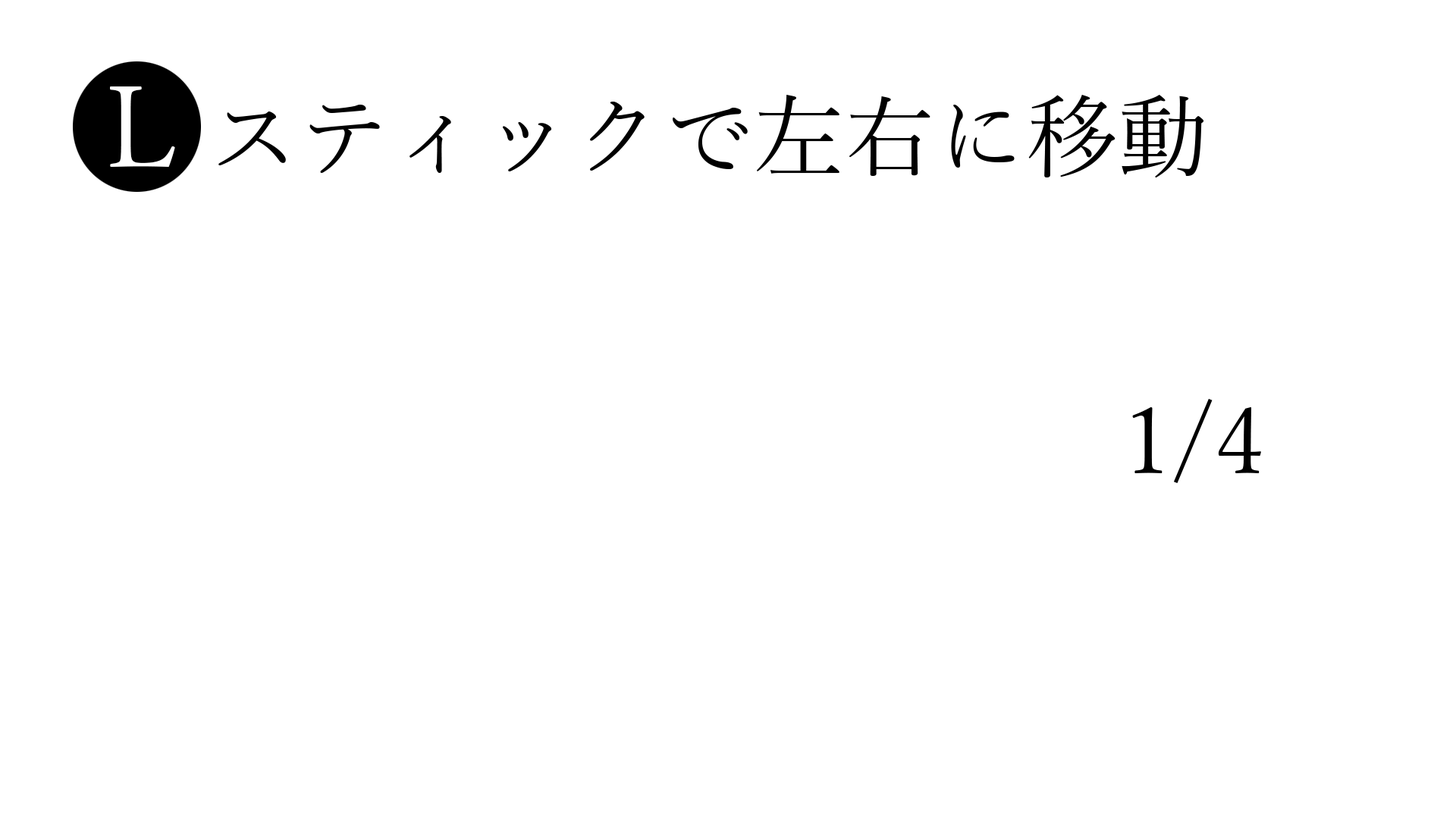
<style>
.page{position:relative;width:1456px;height:819px;background:#ffffff}
.page>*{position:absolute;margin:0}
.t1{font:91px "YuMincho-Regular";color:#000000}
.t2{font:113.7px "YuMincho-Regular";color:#ffffff}
</style>
<div class="page">
<p class="t1" style="left:110px;top:86px;width:1094px;height:91px"><span class="t2">L </span>スティックで左右に移動</p>
<p class="t1" style="left:1132px;top:399px;width:129px;height:84px">1/4</p>
</div>
